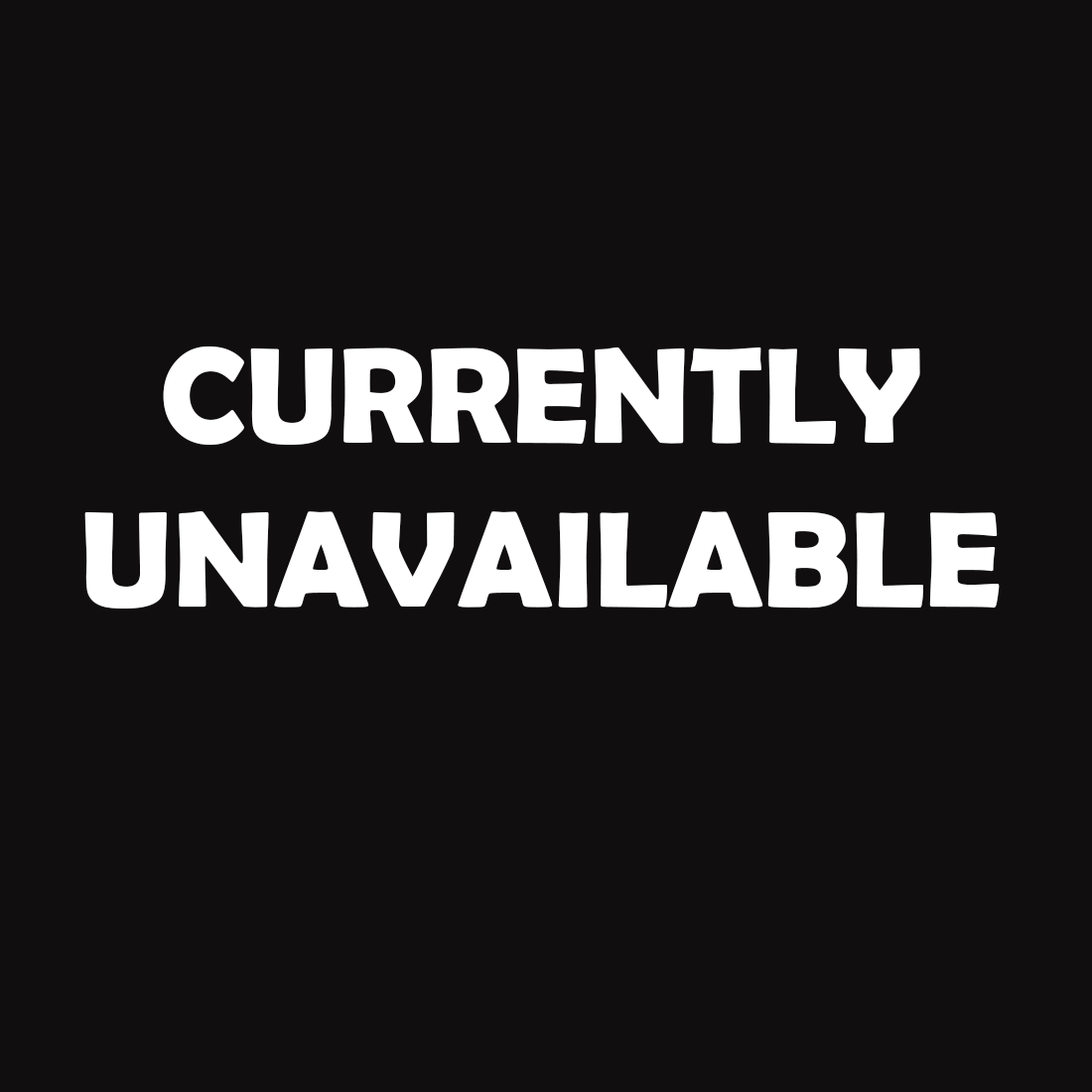
<style>
.page{position:relative;width:1092px;height:1092px;background:#100e0e}
.page>*{position:absolute;margin:0}
.t1{font:136.5px "BerlinSansFBDemi-Bold";color:#ffffff}
</style>
<div class="page">
<p class="t1" style="left:84px;top:346px;width:916px;height:263px;text-align:center">CURRENTLY<br>UNAVAILABLE</p>
</div>
